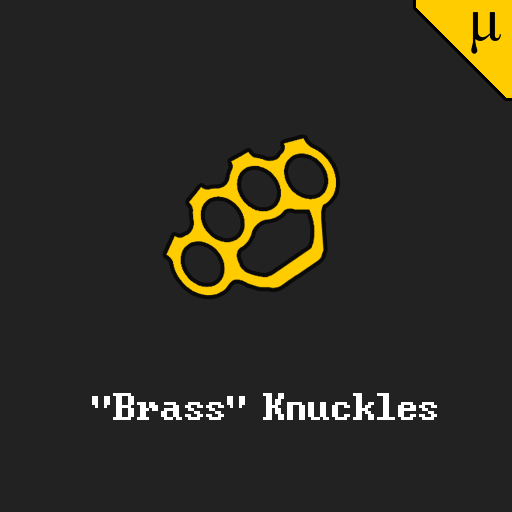
<style>
.page{position:relative;width:512px;height:512px;background:#222222}
.page>*{position:absolute;margin:0}
.t1{font:48px "DwarfFortressVan";color:#ffffff}
</style>
<div class="page">
<p class="t1" style="left:92px;top:393px;width:345px;height:27px">"Brass" Knuckles</p>
</div>
